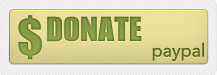
<style>
.page{position:relative;width:217px;height:75px}
.page>*{position:absolute;margin:0}
.t1{font:72px "JCHEadA";color:#90a84a}
.t2{font:36px "JCHEadA";color:#7f9441}
.t3{font:18px "Avenir-Roman";color:#55632c}
</style>
<div class="page">
<p class="t1" style="left:18px;top:15px;width:24px;height:45px">$</p>
<p class="t2" style="left:47px;top:16px;width:95px;height:26px">DONATE</p>
<p class="t3" style="left:152px;top:42px;width:52px;height:19px">paypal</p>
</div>
